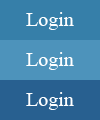
<style>
.page{position:relative;width:100px;height:120px;background:#4d93bb}
.page>*{position:absolute;margin:0}
.t1{font:20px "TimesNewRomanPSMT";color:#ffffff}
</style>
<div class="page">
<p class="t1" style="left:26px;top:52px;width:48px;height:18px">Login</p>
<p class="t1" style="left:26px;top:92px;width:48px;height:18px">Login</p>
</div>
